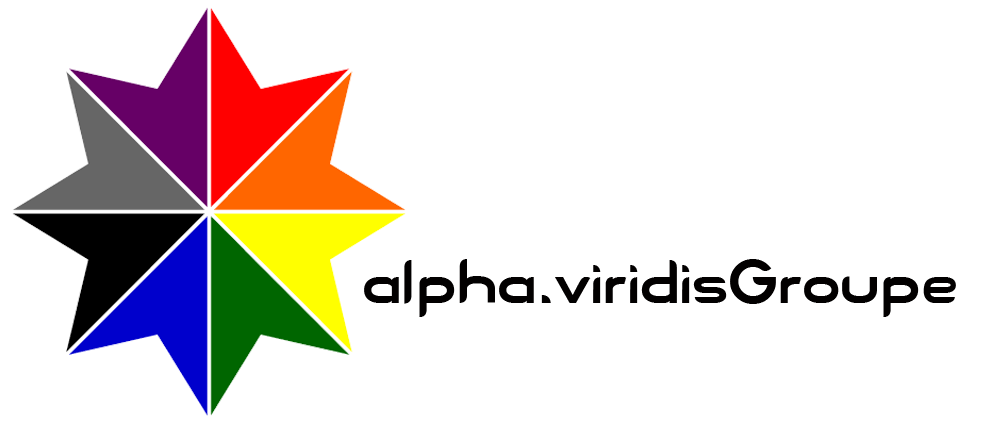
<style>
.page{position:relative;width:1000px;height:421px;background:#ffffff}
.page>*{position:absolute;margin:0}
.t1{font:64px "Blue";color:#020000}
</style>
<div class="page">
<p class="t1" style="left:364px;top:259px;width:592px;height:58px">alpha.viridisGroupe</p>
</div>
